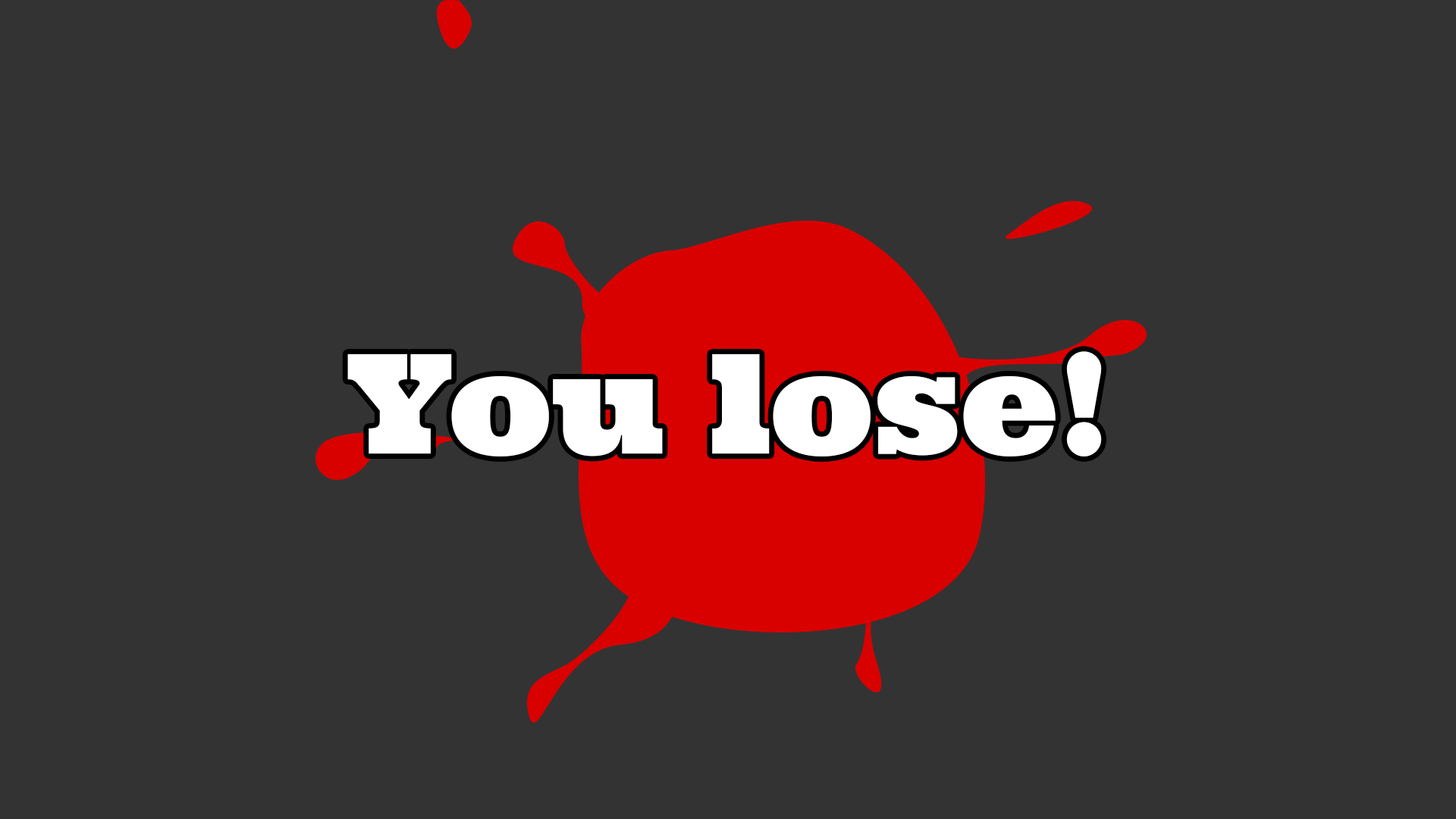
<style>
.page{position:relative;width:1456px;height:819px;background:#333333}
.page>*{position:absolute;margin:0}
.t1{font:138.2px "Ultra";color:#ffffff}
</style>
<div class="page">
<p class="t1" style="left:347px;top:351px;width:755px;height:106px">You lose!</p>
</div>
